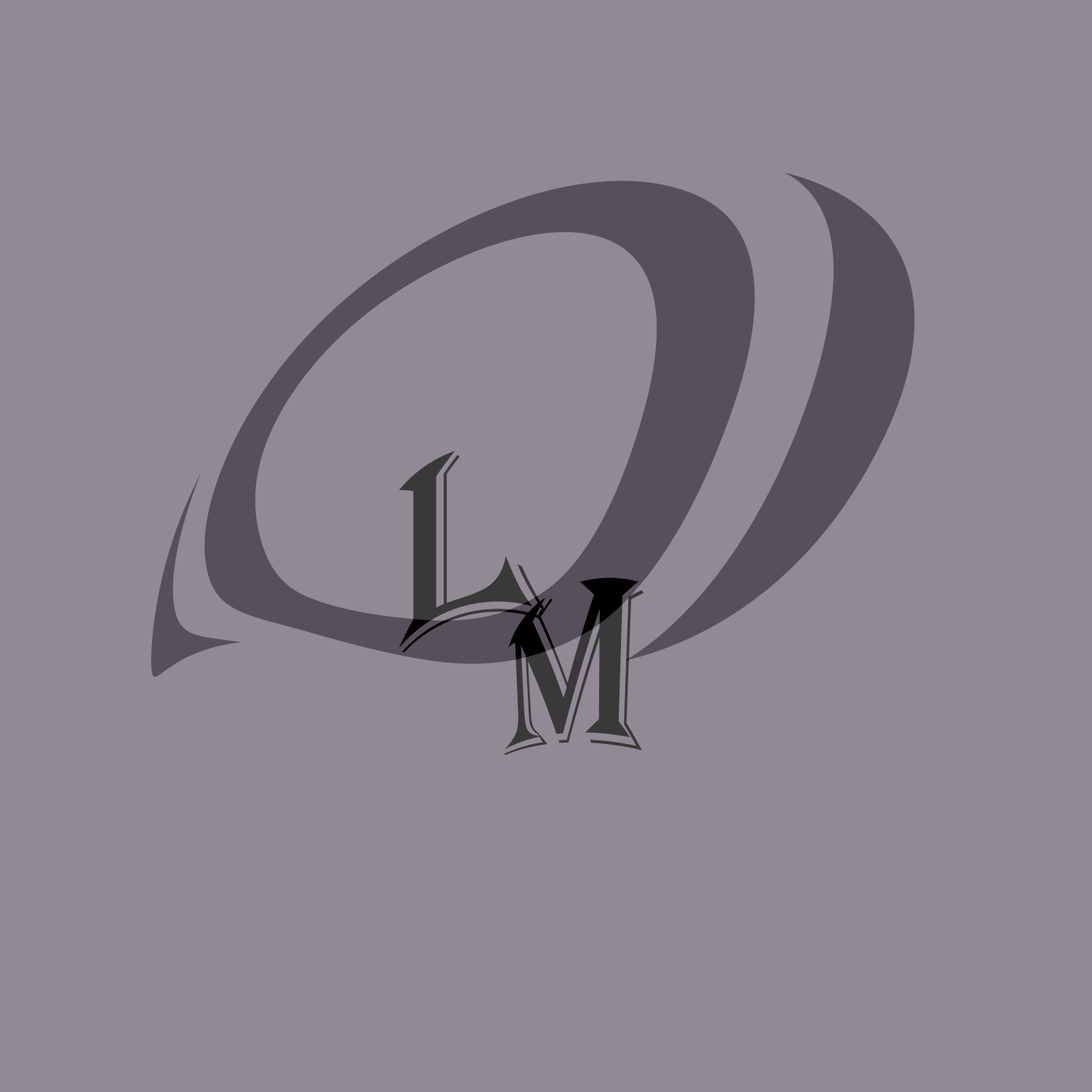
<style>
.page{position:relative;width:1092px;height:1092px;background:#918994}
.page>*{position:absolute;margin:0}
.t1{font:967.6px "ColonnaMT";color:#57505b;scale:1.54 1}
.t2{font:251.8px "Algerian";color:#3a3939}
.t3{font:171.1px "Algerian";color:#3a3939;scale:1.04 1}
</style>
<div class="page">
<p class="t1" style="left:151px;top:172px;width:764px;height:505px">o</p>
<p class="t2" style="left:399px;top:451px;width:146px;height:201px">L</p>
<p class="t3" style="left:504px;top:577px;width:140px;height:179px">M</p>
</div>
